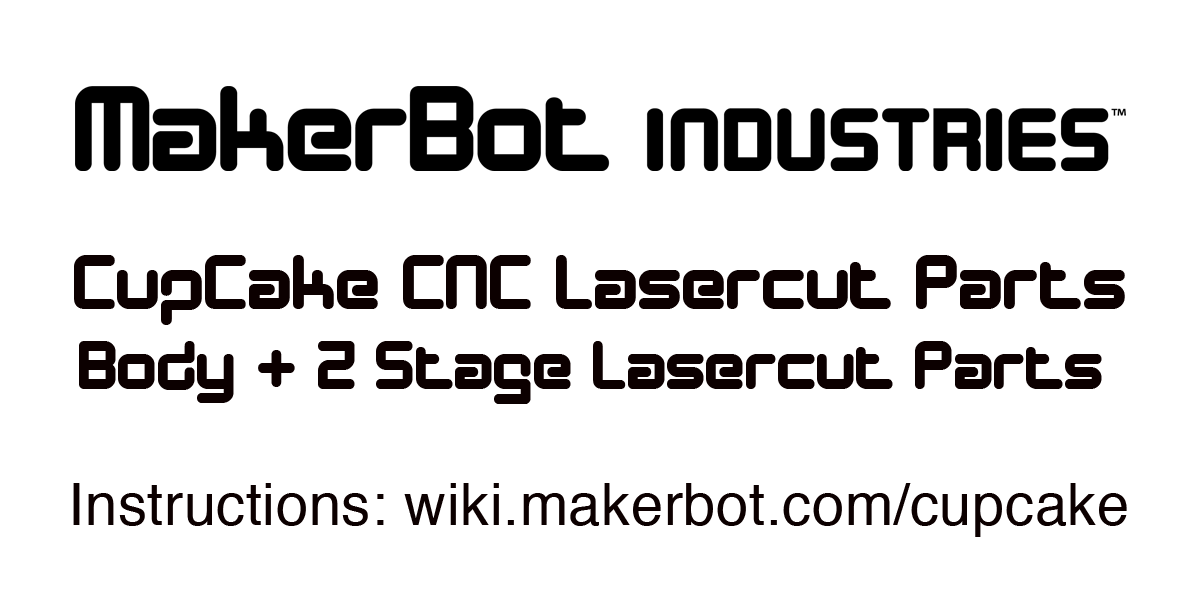
<style>
.page{position:relative;width:1200px;height:600px;background:#ffffff}
.page>*{position:absolute;margin:0}
.t1{font:79.1px "DesignerBlock";letter-spacing:0.01em;color:#0c0000}
.t2{font:70.9px "DesignerBlock";letter-spacing:0.01em;color:#0c0000}
.t3{font:57.9px "Helvetica";letter-spacing:0.01em;color:#0c0000}
</style>
<div class="page">
<p class="t1" style="left:74px;top:255px;width:1051px;height:70px">CupCake CNC Lasercut Parts</p>
<p class="t2" style="left:79px;top:341px;width:1023px;height:63px">Body + Z Stage Lasercut Parts</p>
<p class="t3" style="left:73px;top:483px;width:1054px;height:54px">Instructions: wiki.makerbot.com/cupcake</p>
</div>
